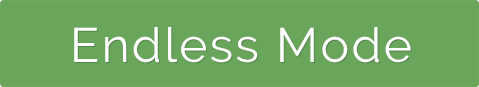
<style>
.page{position:relative;width:479px;height:87px;background:#69a55a}
.page>*{position:absolute;margin:0}
.t1{font:48px "Raleway";letter-spacing:0.05em;color:#ffffff}
</style>
<div class="page">
<p class="t1" style="left:74px;top:27px;width:337px;height:36px">Endless Mode</p>
</div>
